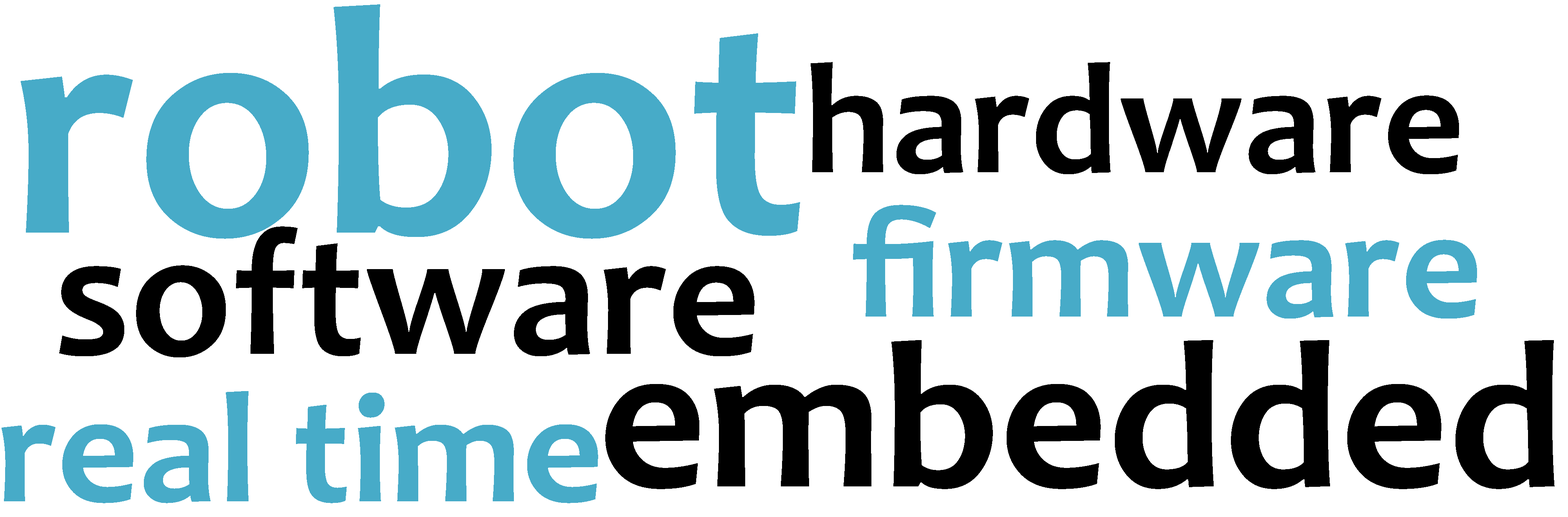
<style>
.page{position:relative;width:1568px;height:517px;background:#ffffff}
.page>*{position:absolute;margin:0}
.t1{font:327.6px "Candara-Bold";color:#47abc8}
.t2{font:158.4px "Candara-Bold";color:#000000}
.t3{font:158.4px "Candara-Bold";color:#47abc8}
.t4{font:181.5px "Candara-Bold";color:#000000}
.t5{font:210.4px "Candara-Bold";color:#000000}
</style>
<div class="page">
<p class="t1" style="left:20px;top:4px;width:780px;height:235px">robot</p>
<p class="t2" style="left:811px;top:62px;width:648px;height:112px">hardware</p>
<p class="t3" style="left:853px;top:205px;width:624px;height:113px">firmware</p>
<p class="t4" style="left:59px;top:226px;width:696px;height:131px">software</p>
<p class="t5" style="left:605px;top:340px;width:950px;height:149px">embedded</p>
<p class="t3" style="left:2px;top:391px;width:596px;height:112px">real time</p>
</div>
